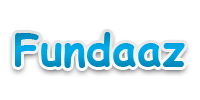
<style>
.page{position:relative;width:200px;height:100px;background:#ffffff}
.page>*{position:absolute;margin:0}
.t1{font:44.4px "ComicSansMS-Bold";color:#00a0d9}
</style>
<div class="page">
<p class="t1" style="left:15px;top:32px;width:170px;height:36px">Fundaaz</p>
</div>
